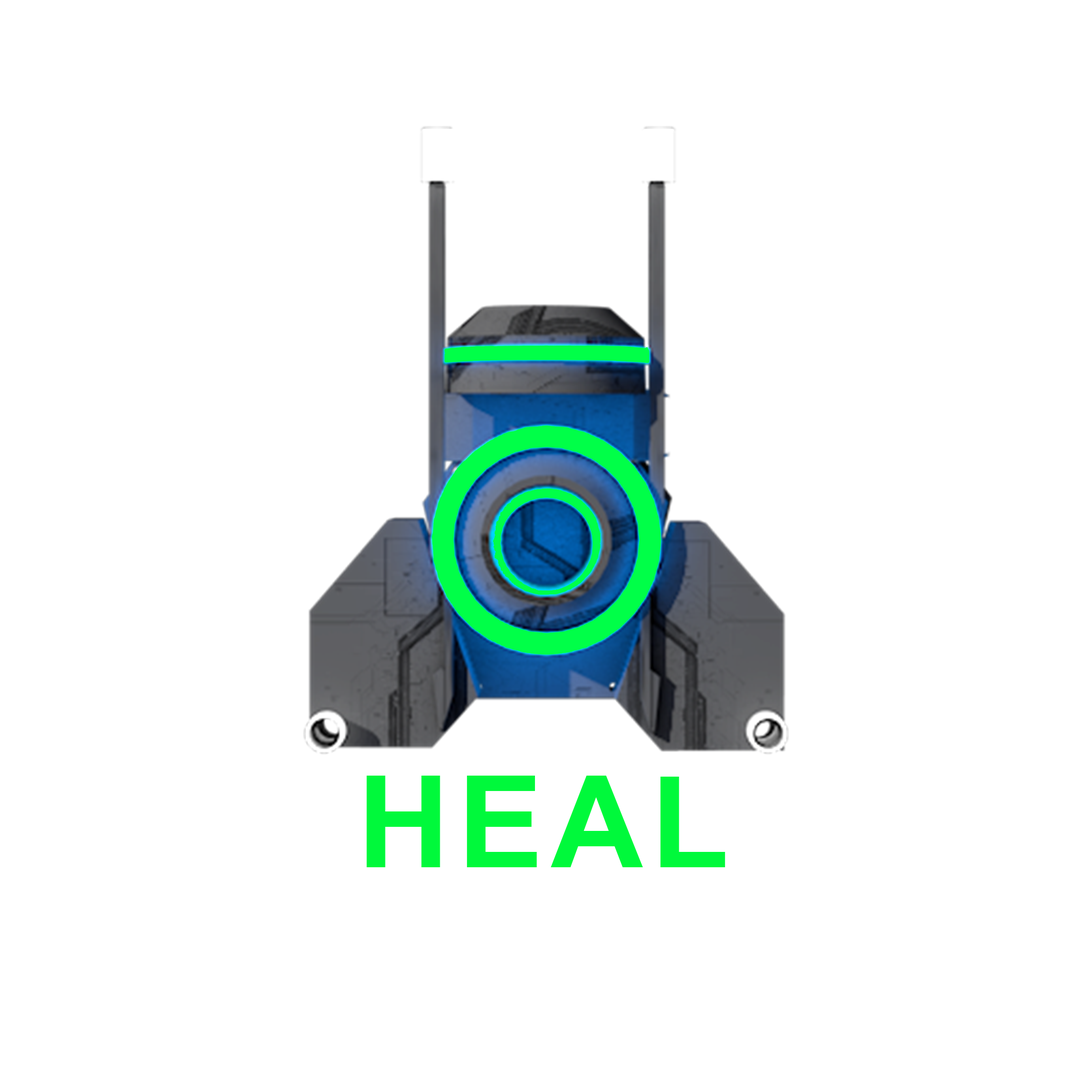
<style>
.page{position:relative;width:1092px;height:1092px;background:#ffffff}
.page>*{position:absolute;margin:0}
.t1{font:128px "Arial-BoldMT";letter-spacing:0.025em;color:#00f93b;text-transform:uppercase}
</style>
<div class="page">
<p class="t1" style="left:367px;top:776px;width:358px;height:91px">HEAL</p>
</div>
